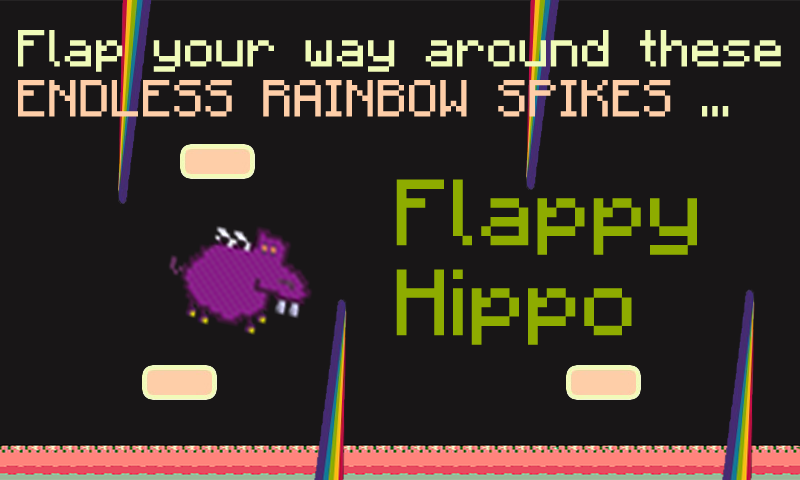
<style>
.page{position:relative;width:800px;height:480px;background:#181617}
.page>*{position:absolute;margin:0}
.t1{font:41.7px "Minecraftia";color:#f0fbb9}
.t2{font:41.7px "Minecraftia";color:#fecea8}
.t3{font:75px "Minecraftia";color:#8eac00}
</style>
<div class="page">
<p class="t1" style="left:18px;top:30px;width:763px;height:87px">Flap your way around these <br><span class="t2">ENDLESS RAINBOW SPIKES</span> ...</p>
<p class="t3" style="left:396px;top:179px;width:301px;height:166px">Flappy Hippo</p>
</div>
